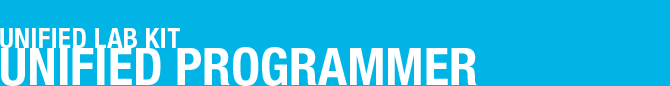
<style>
.page{position:relative;width:670px;height:86px;background:#00b5e5}
.page>*{position:absolute;margin:0}
.t1{font:28px "HelveticaNeueLTPro-BdCn";color:#ffffff}
.t2{font:52px "HelveticaNeueLTPro-BdCn";color:#ffffff}
</style>
<div class="page">
<p class="t1" style="left:0px;top:28px;width:180px;height:20px">UNIFIED LAB KIT</p>
<p class="t2" style="left:1px;top:47px;width:476px;height:39px">UNIFIED PROGRAMMER</p>
</div>
